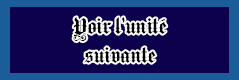
<style>
.page{position:relative;width:239px;height:80px;background:#0d004c}
.page>*{position:absolute;margin:0}
.t1{font:24px "MediciText";color:#000000}
</style>
<div class="page">
<p class="t1" style="left:73px;top:17px;width:94px;height:46px;text-align:center">Voir l’unité<br>suivante</p>
</div>
